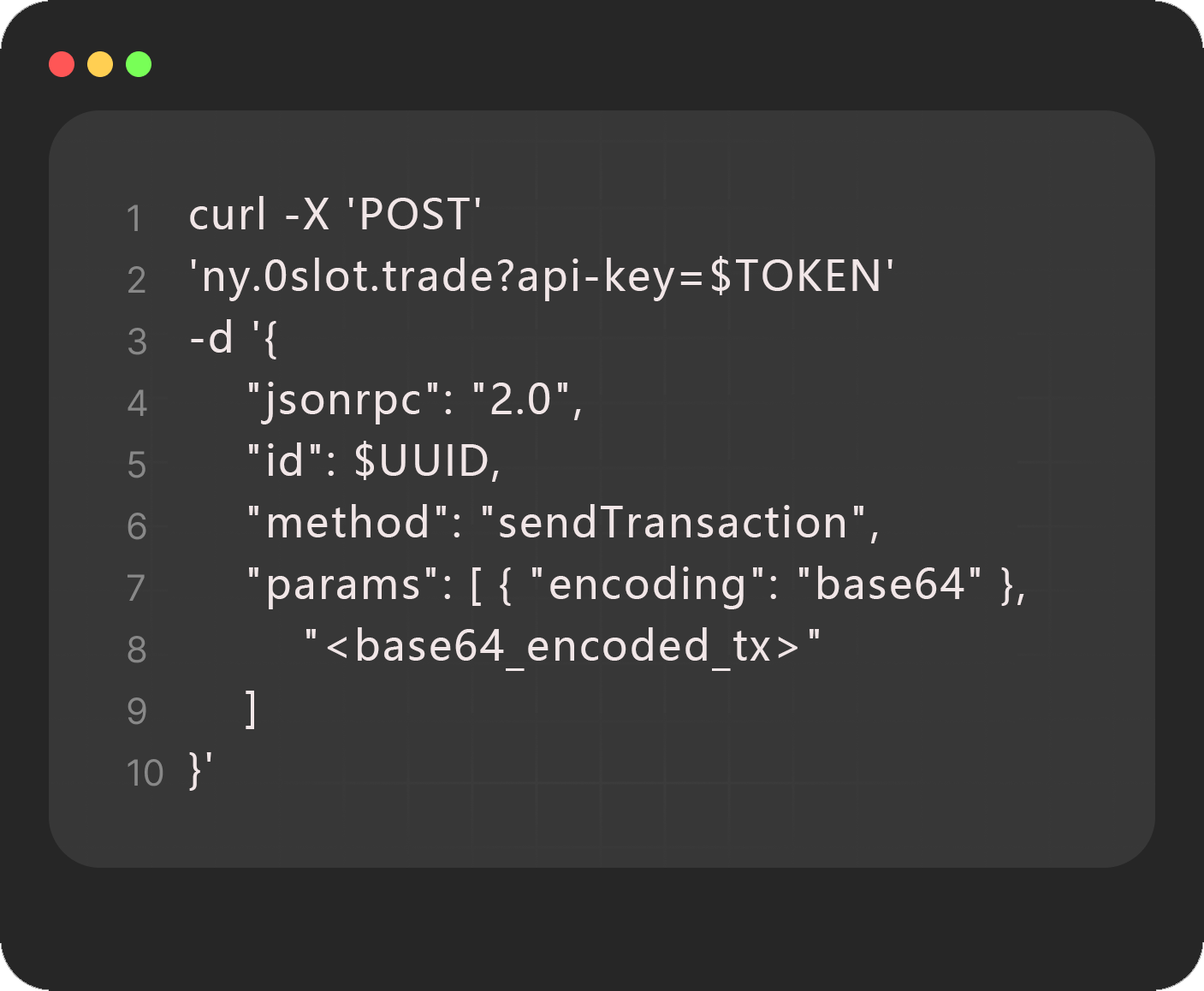
<style>
.page{position:relative;width:1204px;height:991px;background:#373737}
.page>*{position:absolute;margin:0}
.t1{font:41.1px/61.6px "MicrosoftYaHei";letter-spacing:0.05em;color:#f1e6e7}
</style>
<div class="page">
<p class="t1" style="left:189px;top:196px;width:835px;height:594px">curl -X 'POST' <br>'ny.0slot.trade?api-key=$TOKEN'<br>-d '{<br>    "jsonrpc": "2.0",<br>    "id": $UUID,<br>    "method": "sendTransaction",<br>    "params": [ { "encoding": "base64" },<br>        "&lt;base64_encoded_tx&gt;"        <br>    ] <br>}'</p>
</div>
